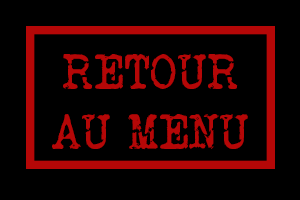
<style>
.page{position:relative;width:300px;height:200px;background:#000000}
.page>*{position:absolute;margin:0}
.t1{font:50px "VeteranTypewriter";color:#b50707}
</style>
<div class="page">
<p class="t1" style="left:52px;top:54px;width:196px;height:96px;text-align:center">RETOUR<br>AU MENU</p>
</div>
